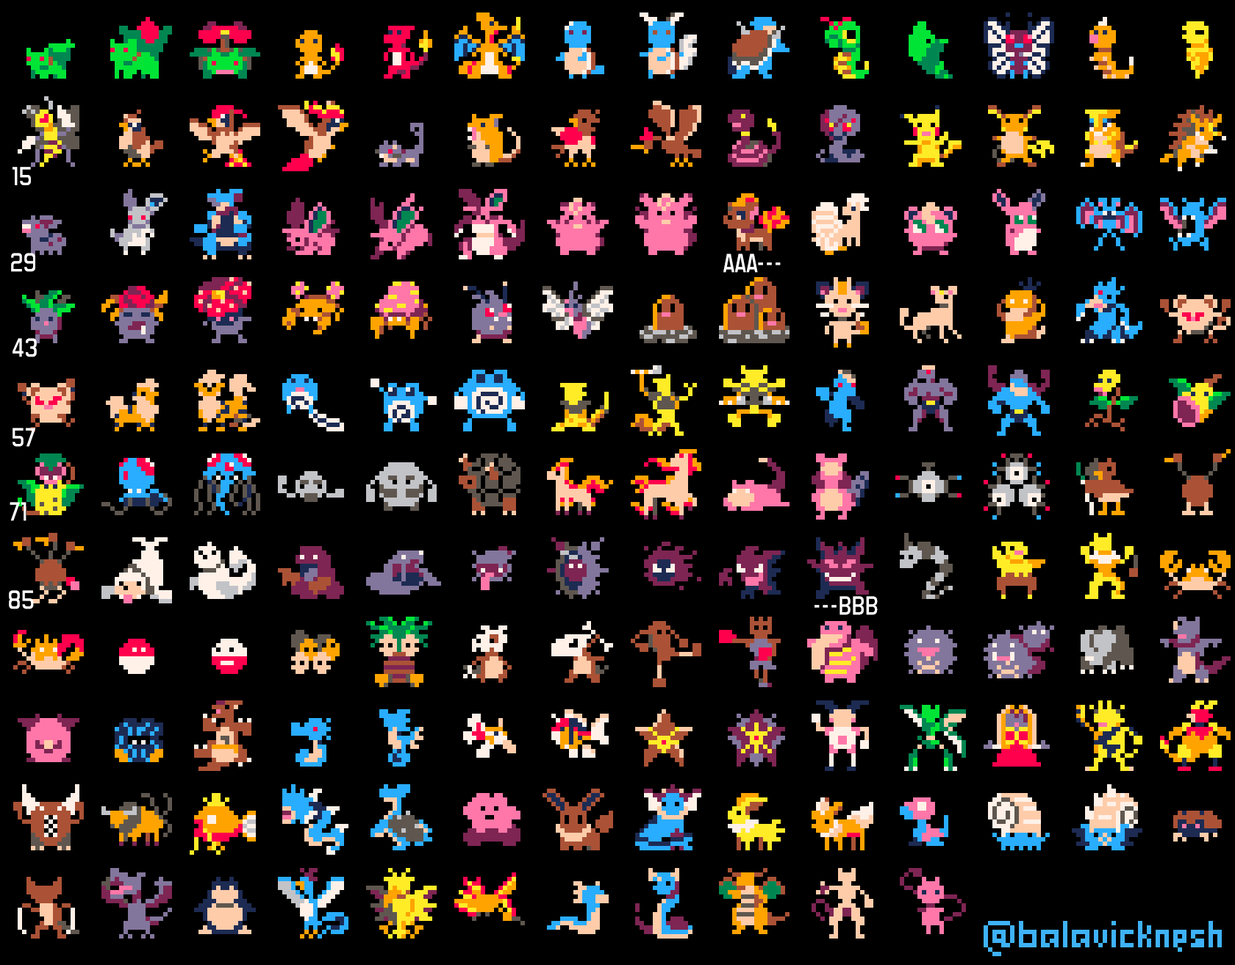
<style>
.page{position:relative;width:1235px;height:965px;background:#000000}
.page>*{position:absolute;margin:0}
.t1{font:30.1px "ForgottenFuturist";color:#ffffff;font-weight:bold}
</style>
<div class="page">
<p class="t1" style="left:12px;top:167px;width:19px;height:18px">15</p>
<p class="t1" style="left:11px;top:253px;width:24px;height:19px">29</p>
<p class="t1" style="left:723px;top:254px;width:58px;height:19px">AAA---</p>
<p class="t1" style="left:12px;top:338px;width:25px;height:19px">43</p>
<p class="t1" style="left:12px;top:428px;width:24px;height:19px">57</p>
<p class="t1" style="left:10px;top:502px;width:16px;height:19px">71</p>
<p class="t1" style="left:9px;top:590px;width:25px;height:20px">85</p>
<p class="t1" style="left:815px;top:596px;width:63px;height:19px">---BBB</p>
</div>
